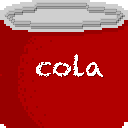
<style>
.page{position:relative;width:128px;height:128px;background:#b10000}
.page>*{position:absolute;margin:0}
.t1{font:28px "Chalkduster";letter-spacing:-0.01em;color:#ffffff}
</style>
<div class="page">
<p class="t1" style="left:36px;top:54px;width:67px;height:23px">cola</p>
</div>
